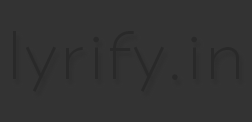
<style>
.page{position:relative;width:252px;height:122px;background:#333333}
.page>*{position:absolute;margin:0}
.t1{font:60px "BonvenoCF-Light";color:#292929}
</style>
<div class="page">
<p class="t1" style="left:13px;top:31px;width:226px;height:61px">lyrify.in</p>
</div>
